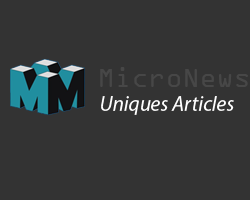
<style>
.page{position:relative;width:250px;height:200px;background:#333333}
.page>*{position:absolute;margin:0}
.t1{font:28.2px "OCRAExtended";color:#474747}
.t2{font:21.2px "MyriadPro-It";color:#ffffff}
</style>
<div class="page">
<p class="t1" style="left:100px;top:67px;width:148px;height:20px">MicroNews</p>
<p class="t2" style="left:101px;top:96px;width:133px;height:19px">Uniques Articles</p>
</div>
